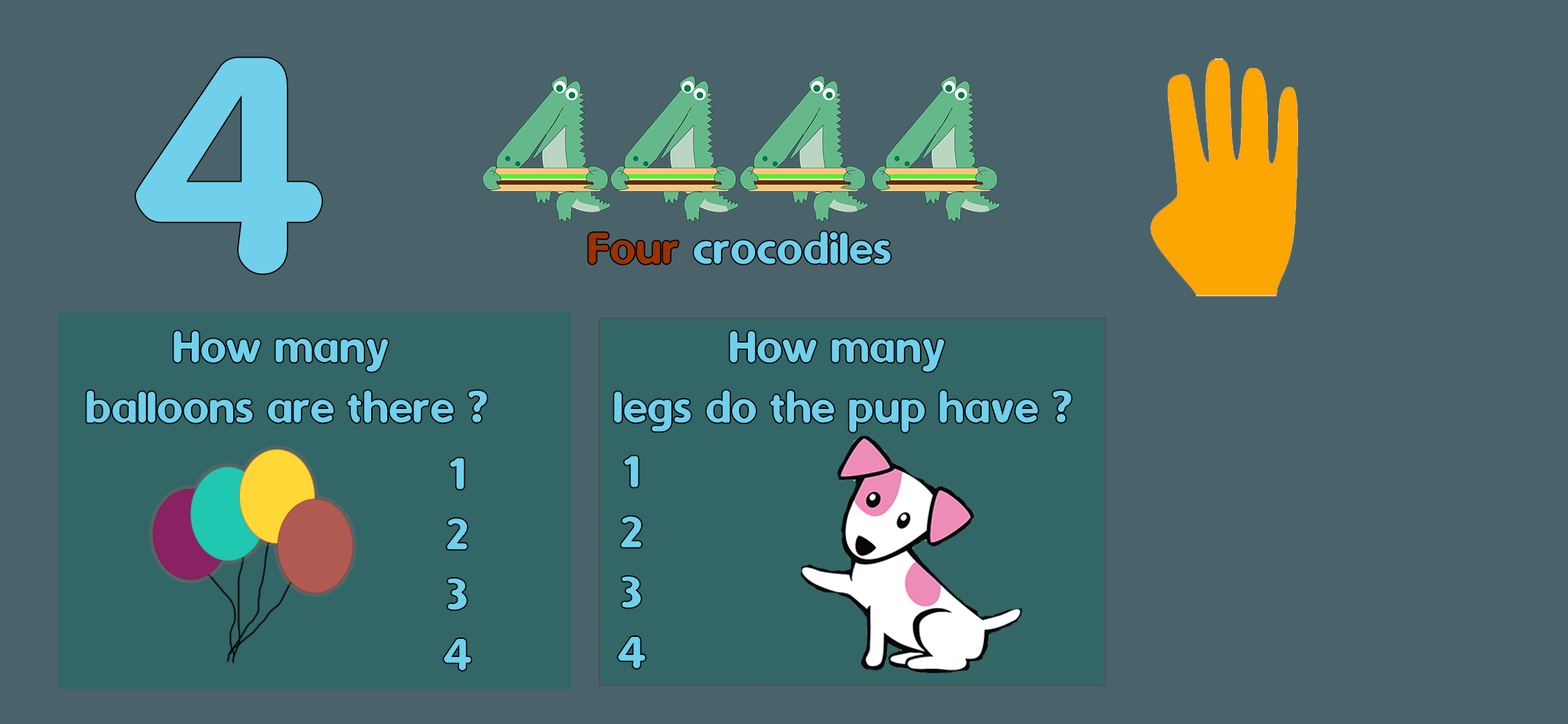
<style>
.page{position:relative;width:1568px;height:724px;background:#4a636b}
.page>*{position:absolute;margin:0}
.t1{font:345.7px "Dyuthi";color:#70d0eb}
.t2{font:50.3px "Dyuthi";color:#70d0eb}
.t3{font:50.3px "Dyuthi";color:#993300}
</style>
<div class="page">
<p class="t1" style="left:135px;top:58px;width:187px;height:216px">4</p>
<p class="t2" style="left:588px;top:231px;width:303px;height:33px"><span class="t3">Four</span> crocodiles</p>
<p class="t2" style="left:86px;top:331px;width:401px;height:92px;text-align:center">How many <br>balloons are there ?</p>
<p class="t2" style="left:614px;top:331px;width:457px;height:101px;text-align:center">How many <br>legs do the pup have ?</p>
<p class="t2" style="left:444px;top:458px;width:27px;height:212px;text-align:center">1<br>2<br>3<br>4</p>
<p class="t2" style="left:618px;top:456px;width:27px;height:212px;text-align:center">1<br>2<br>3<br>4</p>
</div>
